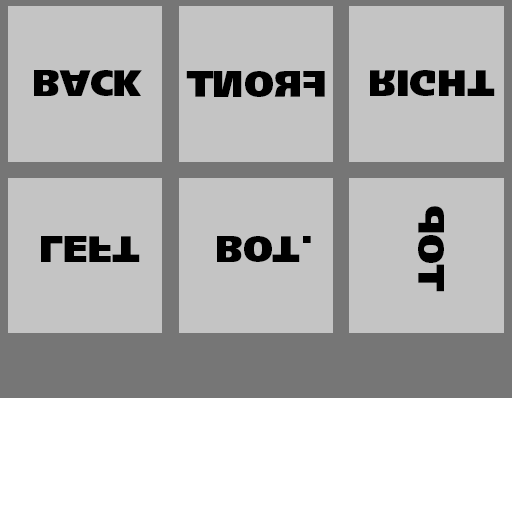
<style>
.page{position:relative;width:512px;height:512px;background:#c4c4c4}
.page>*{position:absolute;margin:0}
.t1{font:36px "AGForeignerX-Plain";color:#000000}
</style>
<div class="page">
<p class="t1" style="left:34px;top:70px;width:108px;height:26px">BACK</p>
<p class="t1" style="left:186px;top:71px;width:139px;height:26px;rotate:180deg">FRONT</p>
<p class="t1" style="left:370px;top:70px;width:125px;height:26px">RIGHT</p>
<p class="t1" style="left:418px;top:206px;width:26px;height:86px;rotate:-90deg">TOP</p>
<p class="t1" style="left:41px;top:236px;width:99px;height:26px">LEFT</p>
<p class="t1" style="left:217px;top:236px;width:94px;height:26px">BOT.</p>
</div>
